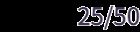
<style>
.page{position:relative;width:140px;height:32px;background:#000000}
.page>*{position:absolute;margin:0}
.t1{font:24px "WebPSD-18463539-0-Regular";color:#3f3254;font-weight:bold}
</style>
<div class="page">
<p class="t1" style="left:0px;top:0px;width:140px;height:32px">25/50</p>
</div>
